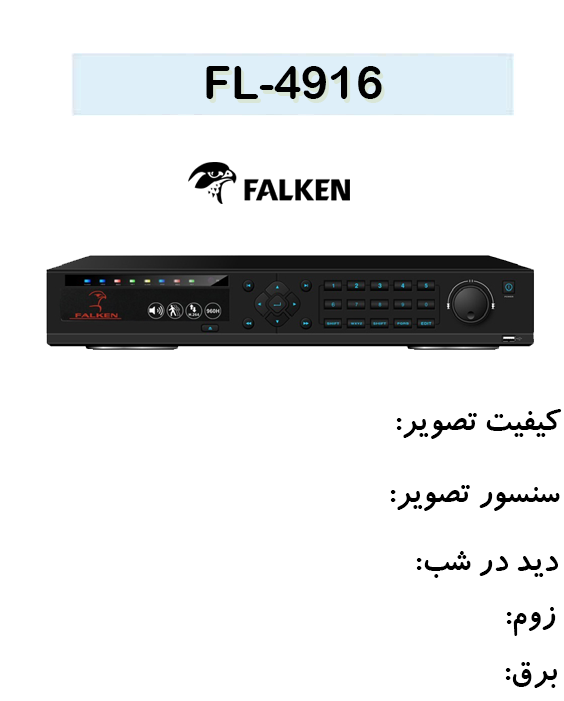
<style>
.page{position:relative;width:564px;height:701px;background:#ffffff}
.page>*{position:absolute;margin:0}
.t1{font:45.9px "ArialRoundedMTBold";color:#000000}
.t2{font:35.3px "BKoodakBold";color:#000000}
</style>
<div class="page">
<p class="t1" style="left:206px;top:66px;width:176px;height:33px">4916-FL</p>
<p class="t2" style="left:396px;top:409px;width:166px;height:30px">کیفیت تصویر:</p>
<p class="t2" style="left:390px;top:485px;width:170px;height:26px">سنسور تصویر:</p>
<p class="t2" style="left:416px;top:551px;width:142px;height:27px">دید در شب:</p>
<p class="t2" style="left:506px;top:607px;width:50px;height:29px">زوم:</p>
<p class="t2" style="left:505px;top:662px;width:52px;height:26px">برق:</p>
</div>
